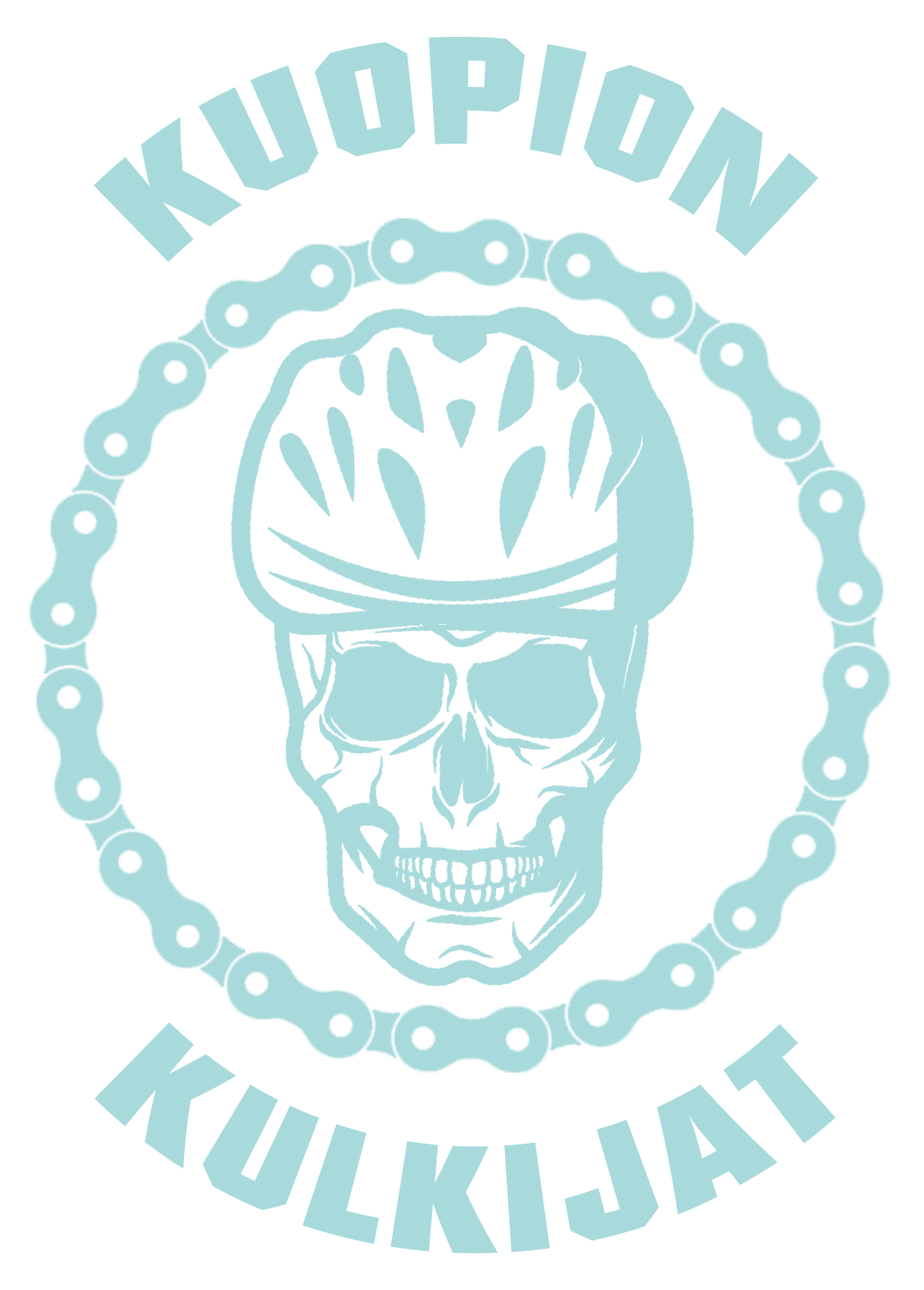
<style>
.page{position:relative;width:924px;height:1290px;background:#ffffff}
.page>*{position:absolute;margin:0}
.t1{font:147.7px "Autumn";letter-spacing:0.05em;color:#a8dadc}
.t2{font:147.4px "Autumn";letter-spacing:0.05em;color:#a8dadc}
</style>
<div class="page">
<p class="t1" style="left:93px;top:36px;width:726px;height:226px">KUOPION</p>
<p class="t2" style="left:94px;top:1022px;width:742px;height:232px">KULKIJAT</p>
</div>
